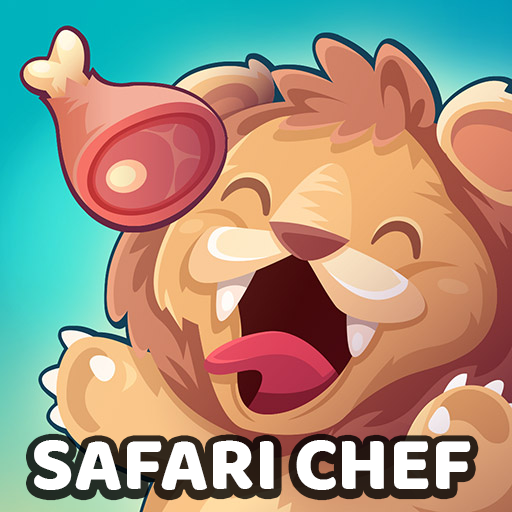
<style>
.page{position:relative;width:512px;height:512px}
.page>*{position:absolute;margin:0}
.t1{font:77.5px "Baloo-Regular";letter-spacing:-0.005em;color:#ffffff}
</style>
<div class="page">
<p class="t1" style="left:34px;top:440px;width:437px;height:50px">SAFARI CHEF</p>
</div>
